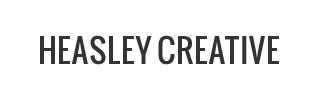
<style>
.page{position:relative;width:320px;height:100px;background:#ffffff}
.page>*{position:absolute;margin:0}
.t1{font:32px "Oswald";color:#333333}
</style>
<div class="page">
<p class="t1" style="left:40px;top:35px;width:239px;height:30px">HEASLEY CREATIVE</p>
</div>
